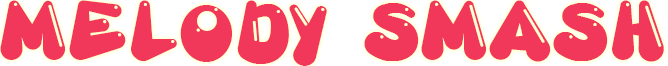
<style>
.page{position:relative;width:668px;height:66px;background:#f2385a}
.page>*{position:absolute;margin:0}
.t1{font:61px "GretoonHighlight";letter-spacing:0.1em;color:#f2385a}
</style>
<div class="page">
<p class="t1" style="left:0px;top:0px;width:664px;height:66px">MELODY SMASH</p>
</div>
